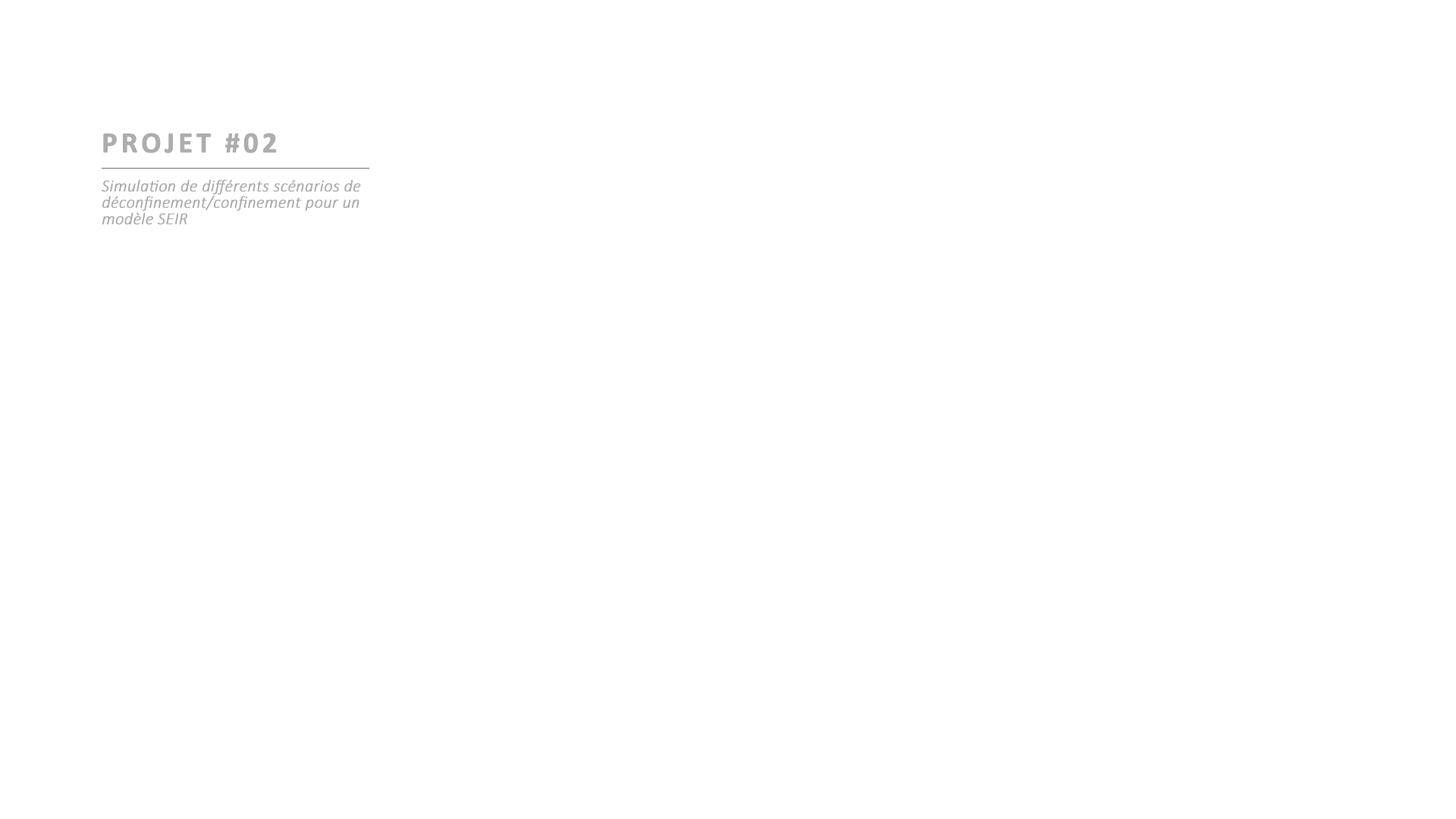
<style>
.page{position:relative;width:1456px;height:819px;background:#ffffff}
.page>*{position:absolute;margin:0}
.t1{font:29.4px "Calibri-Bold";letter-spacing:0.1em;color:#adadad;font-weight:bold}
.t2{font:16.6px/16.4px "Calibri-LightItalic";color:#adadad;font-weight:bold}
</style>
<div class="page">
<p class="t1" style="left:103px;top:133px;width:174px;height:20px">PROJET #02</p>
<p class="t2" style="left:102px;top:180px;width:259px;height:44px">Simulation de différents scénarios de <br>déconfinement/confinement pour un <br>modèle SEIR</p>
</div>
